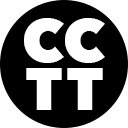
<style>
.page{position:relative;width:128px;height:128px;background:#000000}
.page>*{position:absolute;margin:0}
.t1{font:60px/48px "AvenirNext-Heavy";color:#ffffff}
.t2{font:60px/48px "AvenirNext-Heavy";letter-spacing:-0.01em;color:#ffffff}
</style>
<div class="page">
<p class="t1" style="left:24px;top:18px;width:81px;height:92px">CC<br><span class="t2">TT</span></p>
</div>
